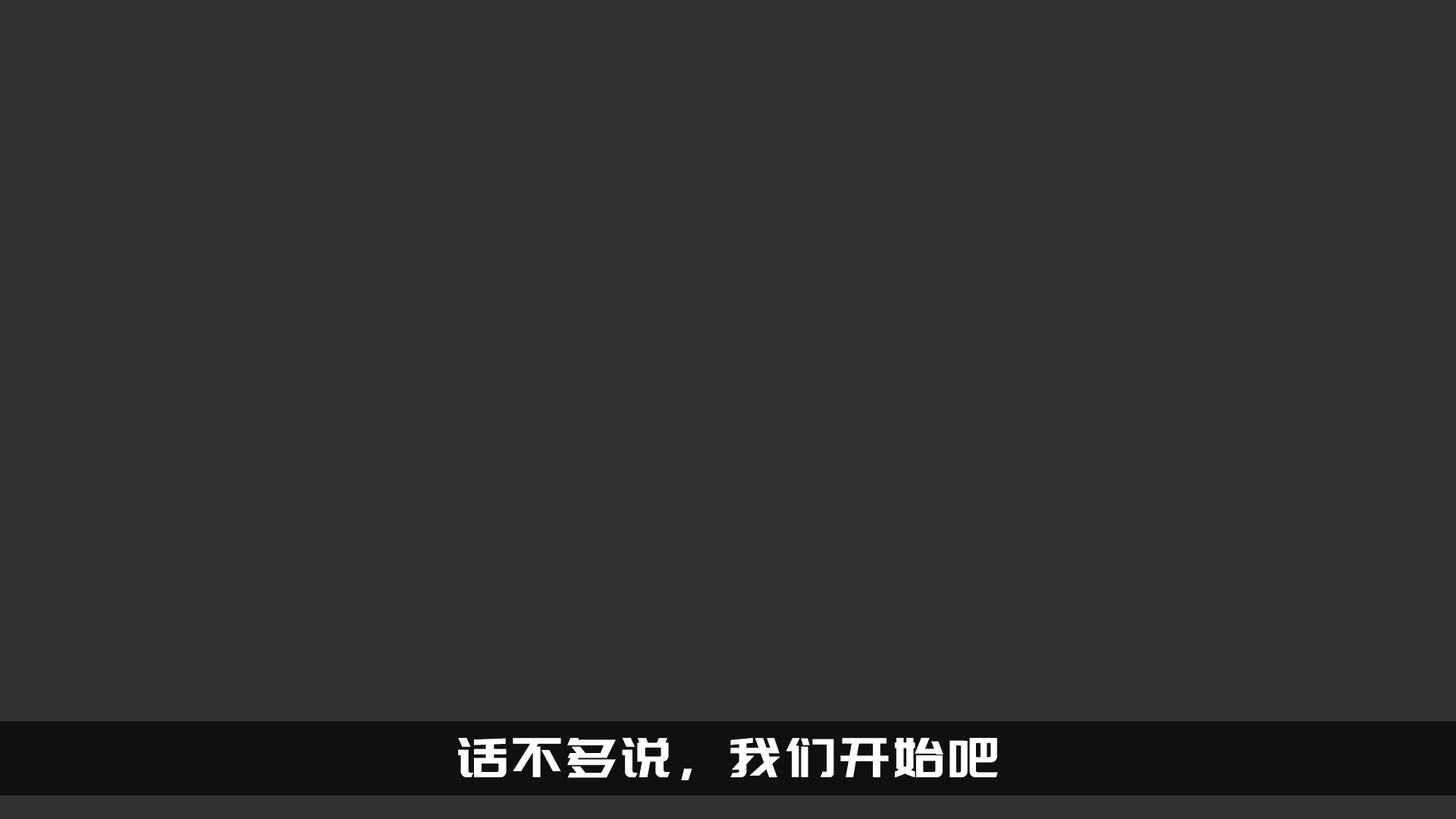
<style>
.page{position:relative;width:1456px;height:819px;background:#333333}
.page>*{position:absolute;margin:0}
.t1{font:54.6px "PangMenZhengDao-3";color:#ffffff}
</style>
<div class="page">
<p class="t1" style="left:458px;top:738px;width:540px;height:42px">话不多说，我们开始吧</p>
</div>
